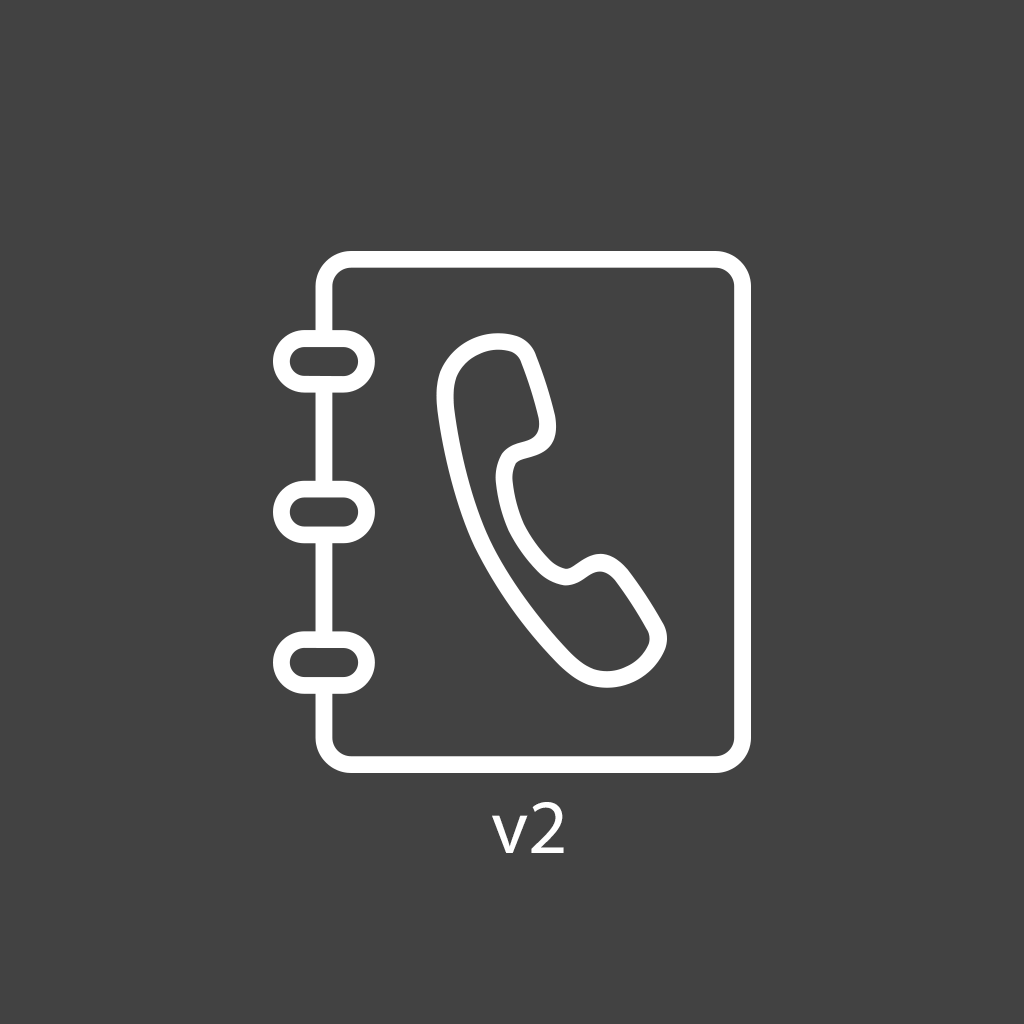
<style>
.page{position:relative;width:1024px;height:1024px;background:#424242}
.page>*{position:absolute;margin:0}
.t1{font:77.2px "MyriadConceptRoman-Regular";color:#ffffff}
</style>
<div class="page">
<p class="t1" style="left:492px;top:802px;width:72px;height:51px">v2</p>
</div>
